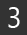
<style>
.page{position:relative;width:27px;height:35px;background:#333333}
.page>*{position:absolute;margin:0}
.t1{font:29px "SegoeUI";color:#ffffff;scale:0.93 1}
</style>
<div class="page">
<p class="t1" style="left:8px;top:7px;width:12px;height:21px">3</p>
</div>
